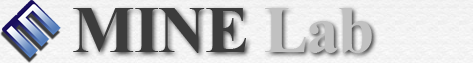
<style>
.page{position:relative;width:473px;height:63px}
.page>*{position:absolute;margin:0}
.t1{font:100px "AngsanaNew-Bold";color:#3c3c3c}
.t2{font:100px "AngsanaNew-Bold";color:#c1c1c1}
</style>
<div class="page">
<p class="t1" style="left:73px;top:8px;width:299px;height:45px">MINE <span class="t2">Lab</span></p>
</div>
